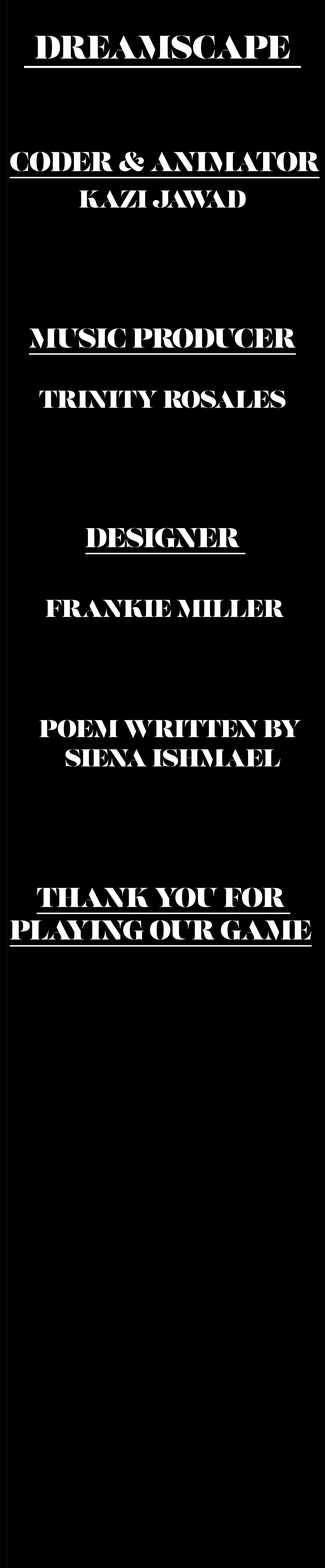
<style>
.page{position:relative;width:325px;height:1568px;background:#000000}
.page>*{position:absolute;margin:0}
.t1{font:32.5px "LustStencil-Regular";color:#ffffff}
.t2{font:27.1px "LustStencil-Regular";color:#ffffff;text-decoration:underline}
.t3{font:24.4px "LustStencil-Regular";color:#ffffff}
</style>
<div class="page">
<p class="t1" style="left:35px;top:35px;width:255px;height:25px">DREAMSCAPE</p>
<p class="t2" style="left:10px;top:152px;width:310px;height:26px">CODER &amp; ANIMATOR ANIMATOR</p>
<p class="t3" style="left:79px;top:190px;width:167px;height:19px">KAZI JAWAD</p>
<p class="t2" style="left:29px;top:328px;width:267px;height:27px">MUSIC PRODUCER</p>
<p class="t3" style="left:39px;top:390px;width:247px;height:18px">TRINITY ROSALES</p>
<p class="t2" style="left:85px;top:528px;width:161px;height:26px">DESIGNER</p>
<p class="t3" style="left:46px;top:599px;width:238px;height:19px">FRANKIE MILLER</p>
<p class="t3" style="left:39px;top:720px;width:262px;height:47px;text-align:center">POEM WRITTEN BY <br>SIENA ISHMAEL</p>
<p class="t2" style="left:10px;top:888px;width:302px;height:59px;text-align:center">THANK YOU FOR <br>PLAYING OUR GAME</p>
</div>
